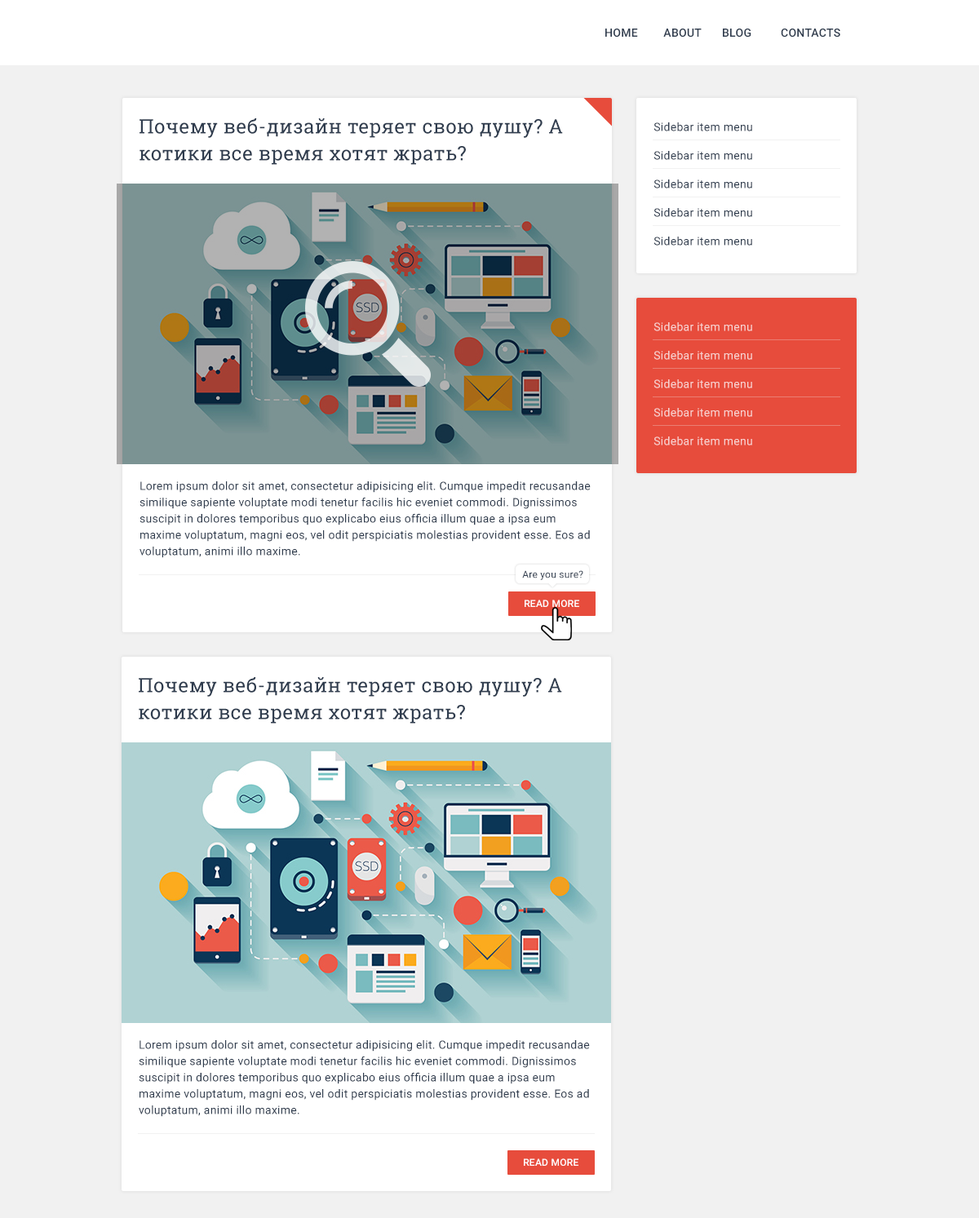
<style>
.page{position:relative;width:979px;height:1218px;background:#f1f1f1}
.page>*{position:absolute;margin:0}
.t1{font:11.4px "Roboto-Medium";letter-spacing:0.02em;color:#2f3c4e;text-transform:uppercase}
.t2{font:19.6px "RobotoSlab-Regular";letter-spacing:0.02em;color:#2f3c4e}
.t3{font:11.4px "Roboto-Regular";letter-spacing:0.02em;color:#2f3c4e}
.t4{font:11.4px "Roboto-Regular";letter-spacing:0.02em;color:#f8d3d0}
.t5{font:11.4px/16.3px "Roboto-Regular";letter-spacing:0.02em;color:#2f3c4e}
.t6{font:9.8px "Roboto-Regular";letter-spacing:0.02em;color:#2f3c4e}
.t7{font:9.8px "Roboto-Medium";letter-spacing:0.02em;color:#fefefe;text-transform:uppercase}
</style>
<div class="page">
<p class="t1" style="left:605px;top:29px;width:235px;height:9px">Home About Blog Contacts</p>
<p class="t2" style="left:140px;top:118px;width:423px;height:47px">Почему веб-дизайн теряет свою душу? А <br>котики все время хотят жрать?</p>
<p class="t3" style="left:653px;top:122px;width:99px;height:9px">Sidebar item menu</p>
<p class="t3" style="left:653px;top:151px;width:99px;height:9px">Sidebar item menu</p>
<p class="t3" style="left:653px;top:179px;width:99px;height:9px">Sidebar item menu</p>
<p class="t3" style="left:653px;top:208px;width:99px;height:9px">Sidebar item menu</p>
<p class="t3" style="left:653px;top:237px;width:99px;height:9px">Sidebar item menu</p>
<p class="t4" style="left:653px;top:322px;width:99px;height:9px">Sidebar item menu</p>
<p class="t4" style="left:653px;top:351px;width:99px;height:9px">Sidebar item menu</p>
<p class="t4" style="left:653px;top:379px;width:99px;height:9px">Sidebar item menu</p>
<p class="t4" style="left:653px;top:408px;width:99px;height:9px">Sidebar item menu</p>
<p class="t4" style="left:653px;top:436px;width:99px;height:9px">Sidebar item menu</p>
<p class="t5" style="left:140px;top:481px;width:451px;height:77px">Lorem ipsum dolor sit amet, consectetur adipisicing elit. Cumque impedit recusandae similique sapiente voluptate modi tenetur facilis hic eveniet commodi. Dignissimos suscipit in dolores temporibus quo explicabo eius officia illum quae a ipsa eum maxime voluptatum, magni eos, vel odit perspiciatis molestias provident esse. Eos ad voluptatum, animi illo maxime.</p>
<p class="t6" style="left:522px;top:570px;width:61px;height:10px">Are you sure?</p>
<p class="t7" style="left:525px;top:600px;width:54px;height:7px">read more</p>
<p class="t2" style="left:139px;top:677px;width:423px;height:47px">Почему веб-дизайн теряет свою душу? А <br>котики все время хотят жрать?</p>
<p class="t5" style="left:139px;top:1040px;width:451px;height:77px">Lorem ipsum dolor sit amet, consectetur adipisicing elit. Cumque impedit recusandae similique sapiente voluptate modi tenetur facilis hic eveniet commodi. Dignissimos suscipit in dolores temporibus quo explicabo eius officia illum quae a ipsa eum maxime voluptatum, magni eos, vel odit perspiciatis molestias provident esse. Eos ad voluptatum, animi illo maxime.</p>
<p class="t7" style="left:524px;top:1158px;width:54px;height:8px">read more</p>
</div>
